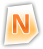
<style>
.page{position:relative;width:43px;height:49px}
.page>*{position:absolute;margin:0}
.t1{font:30px "Calibri-Bold";color:#f87b27}
</style>
<div class="page">
<p class="t1" style="left:13px;top:14px;width:16px;height:20px">N</p>
</div>
